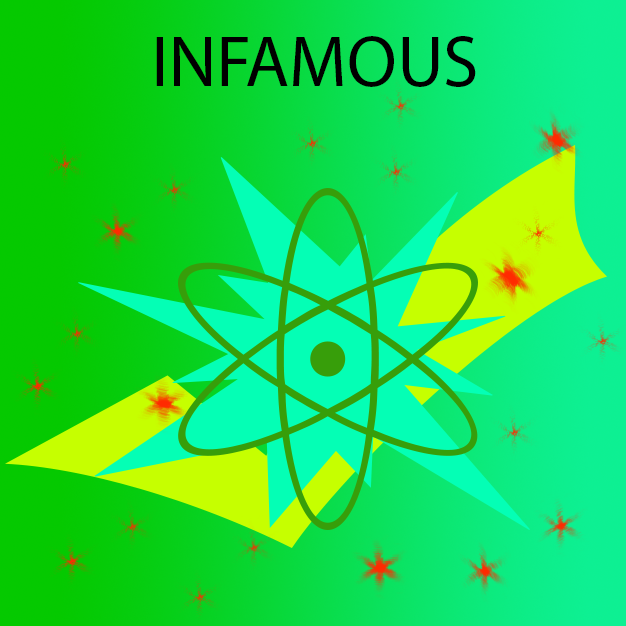
<style>
.page{position:relative;width:626px;height:626px}
.page>*{position:absolute;margin:0}
.t1{font:72px "MyriadPro-Regular";color:#000000}
</style>
<div class="page">
<p class="t1" style="left:156px;top:36px;width:320px;height:51px">INFAMOUS</p>
</div>
